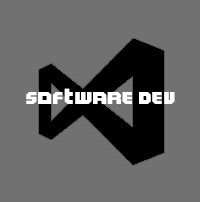
<style>
.page{position:relative;width:200px;height:202px;background:#717171}
.page>*{position:absolute;margin:0}
.t1{font:16px "Twitchy.TV";color:#ffffff}
</style>
<div class="page">
<p class="t1" style="left:26px;top:88px;width:149px;height:16px">software dev</p>
</div>
